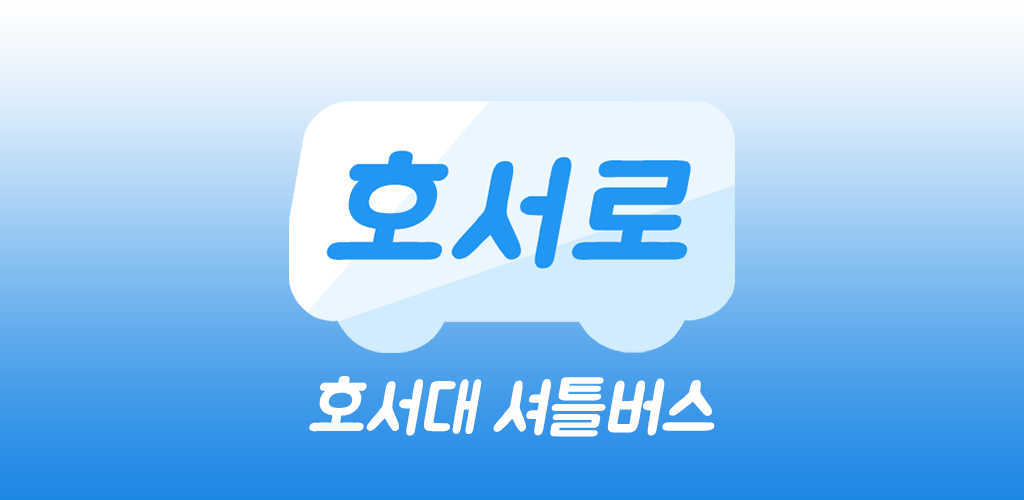
<style>
.page{position:relative;width:1024px;height:500px}
.page>*{position:absolute;margin:0}
.t1{font:70px "BMJUA";color:#ffffff;font-style:italic}
</style>
<div class="page">
<p class="t1" style="left:309px;top:376px;width:406px;height:61px">호서대 셔틀버스</p>
</div>
